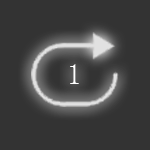
<style>
.page{position:relative;width:150px;height:150px;background:#333333}
.page>*{position:absolute;margin:0}
.t1{font:29.2px "SimSun";color:#ffffff}
</style>
<div class="page">
<p class="t1" style="left:70px;top:64px;width:9px;height:20px">1</p>
</div>
